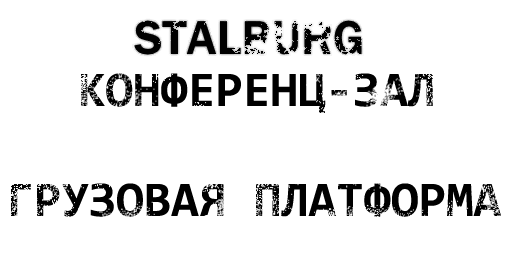
<style>
.page{position:relative;width:512px;height:256px;background:#ffffff}
.page>*{position:absolute;margin:0}
.t1{font:50px "Consolas-Bold";color:#000000}
</style>
<div class="page">
<p class="t1" style="left:81px;top:73px;width:352px;height:40px">КОНФЕРЕНЦ-ЗАЛ</p>
<p class="t1" style="left:11px;top:183px;width:490px;height:34px">ГРУЗОВАЯ ПЛАТФОРМА</p>
</div>
